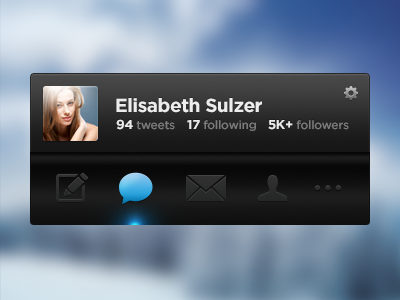
<style>
.page{position:relative;width:400px;height:300px}
.page>*{position:absolute;margin:0}
.t1{font:19px "Gotham-Bold";letter-spacing:-0.025em;color:#ededed}
.t2{font:12px "Gotham-Medium";letter-spacing:-0.025em;color:#7c7c7c}
.t3{font:13px "Gotham-Bold";letter-spacing:-0.025em;color:#ededed}
</style>
<div class="page">
<p class="t1" style="left:116px;top:98px;width:146px;height:15px">Elisabeth Sulzer</p>
<p class="t2" style="left:116px;top:119px;width:59px;height:11px"><span class="t3">94 </span>tweets</p>
<p class="t2" style="left:187px;top:120px;width:69px;height:11px"><span class="t3">17 </span>following</p>
<p class="t2" style="left:268px;top:120px;width:81px;height:10px"><span class="t3">5K+ </span>followers</p>
</div>
